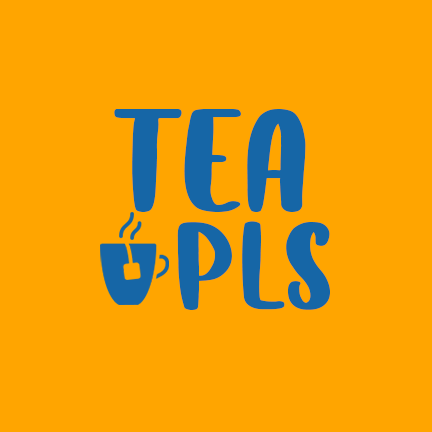
<style>
.page{position:relative;width:432px;height:432px;background:#ffa500}
.page>*{position:absolute;margin:0}
.t1{font:108.6px "LemonTea";letter-spacing:0.05em;color:#1666a6}
.t2{font:92.5px "LemonTea";letter-spacing:0.05em;color:#1666a6}
</style>
<div class="page">
<p class="t1" style="left:114px;top:109px;width:192px;height:103px">TEA</p>
<p class="t2" style="left:177px;top:221px;width:153px;height:89px">pls</p>
</div>
